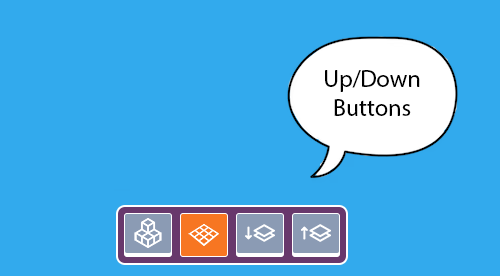
<style>
.page{position:relative;width:500px;height:276px;background:#32aaed}
.page>*{position:absolute;margin:0}
.t1{font:24px "MyriadPro-Regular";color:#000000}
</style>
<div class="page">
<p class="t1" style="left:325px;top:70px;width:95px;height:46px;text-align:center">Up/Down<br>Buttons</p>
</div>
